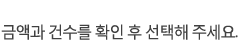
<style>
.page{position:relative;width:251px;height:41px;background:#ffffff}
.page>*{position:absolute;margin:0}
.t1{font:16px "MalgunGothicRegular";letter-spacing:-0.1em;color:#414141;scale:0.97 1}
</style>
<div class="page">
<p class="t1" style="left:1px;top:24px;width:237px;height:16px">금액과 건수를 확인 후 선택해 주세요.</p>
</div>
